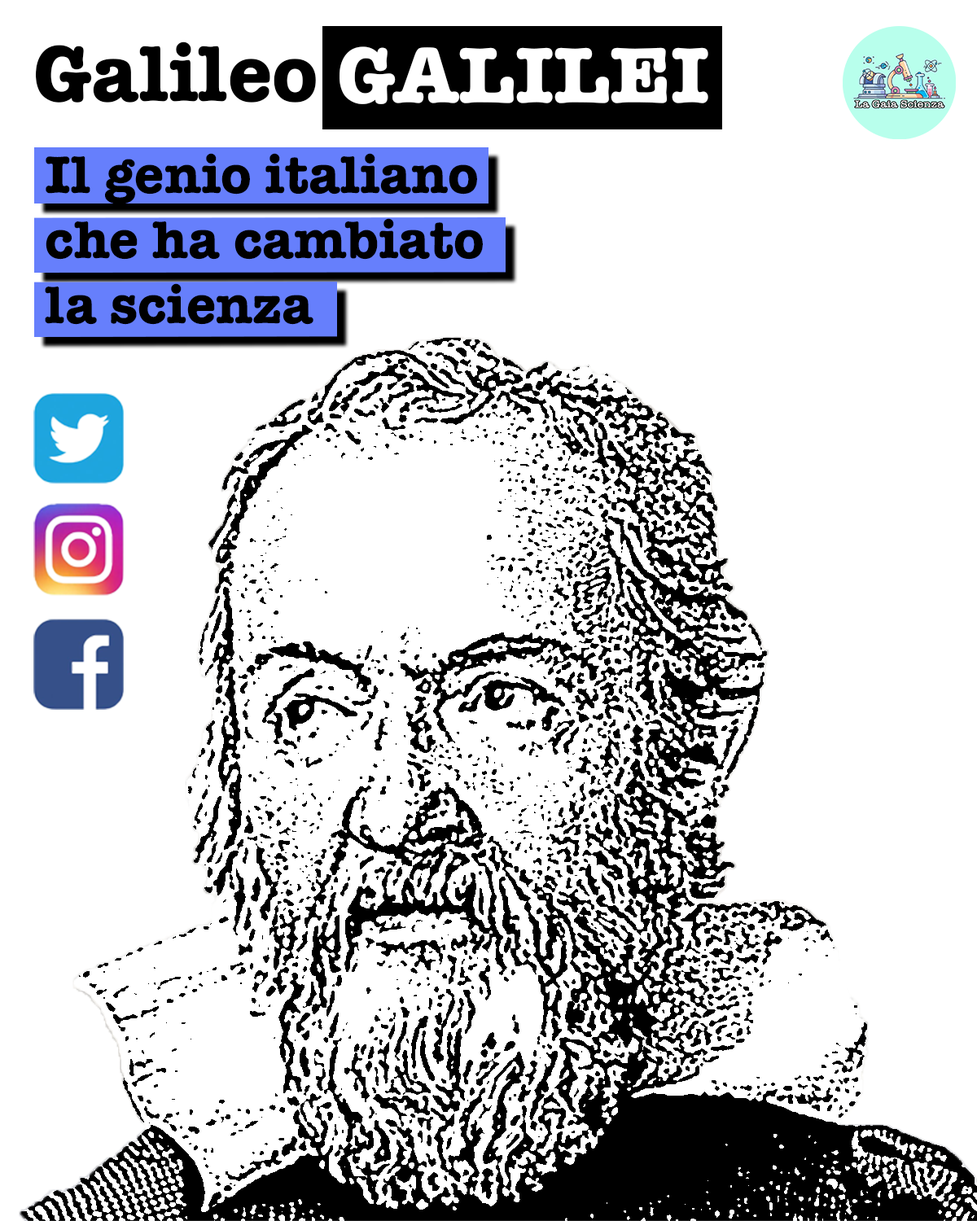
<style>
.page{position:relative;width:977px;height:1221px;background:#ffffff}
.page>*{position:absolute;margin:0}
.t1{font:81.4px "AmericanTypewriter-Bold";color:#000000}
.t2{font:81.4px "AmericanTypewriter-Bold";color:#ffffff}
.t3{font:54.3px "AmericanTypewriter-Bold";color:#000000}
</style>
<div class="page">
<p class="t1" style="left:36px;top:42px;width:280px;height:61px">Galileo</p>
<p class="t2" style="left:339px;top:46px;width:369px;height:58px">GALILEI</p>
<p class="t3" style="left:45px;top:153px;width:438px;height:172px">Il genio italiano <br>che ha cambiato<br>la scienza</p>
</div>
